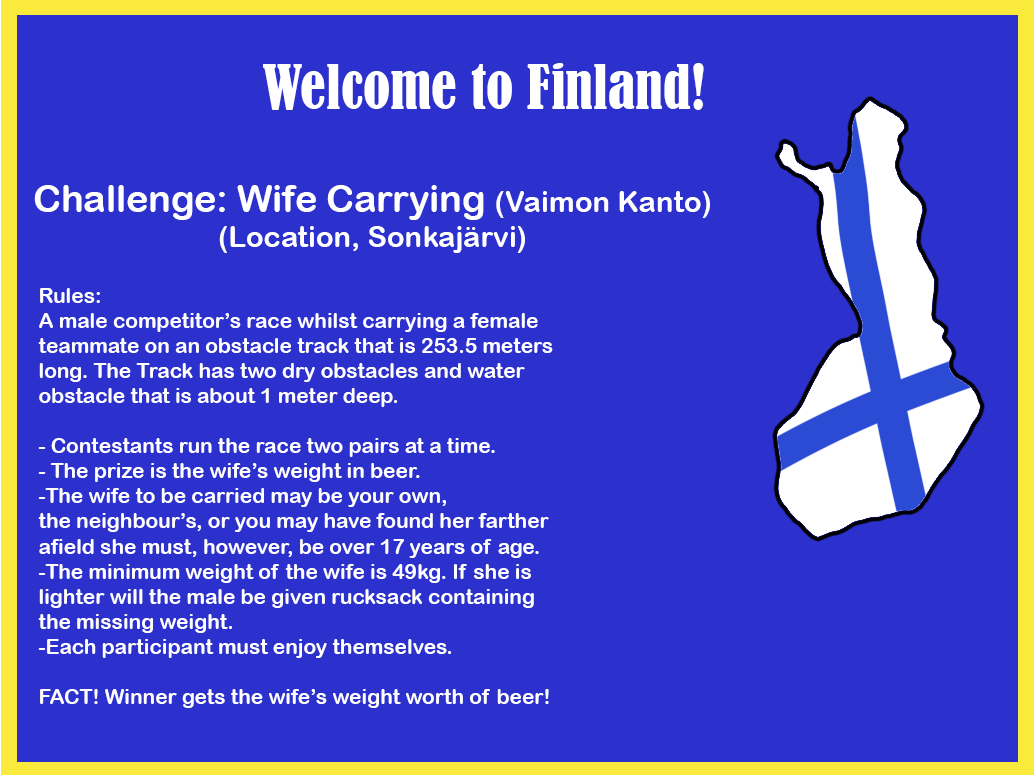
<style>
.page{position:relative;width:1035px;height:775px;background:#2c30cd}
.page>*{position:absolute;margin:0}
.t1{font:56.9px "BernardMT-Condensed";color:#ffffff}
.t2{font:29.2px "ArialRoundedMTBold";color:#ffffff}
.t3{font:37.5px "ArialRoundedMTBold";color:#ffffff}
.t4{font:20.9px "ArialRoundedMTBold";color:#ffffff}
</style>
<div class="page">
<p class="t1" style="left:263px;top:63px;width:441px;height:47px">Welcome to Finland!</p>
<p class="t2" style="left:34px;top:185px;width:676px;height:68px;text-align:center"><span class="t3">Challenge: Wife Carrying </span>(Vaimon Kanto)<br>(Location, Sonkajärvi)</p>
<p class="t4" style="left:38px;top:288px;width:515px;height:420px">Rules: <br>A male competitor’s race whilst carrying a female <br>teammate on an obstacle track that is 253.5 meters <br>long. The Track has two dry obstacles and water <br>obstacle that is about 1 meter deep.<br> <br>- Contestants run the race two pairs at a time. <br>- The prize is the wife’s weight in beer.<br>-The wife to be carried may be your own, <br>the neighbour’s, or you may have found her farther <br>afield she must, however, be over 17 years of age.<br>-The minimum weight of the wife is 49kg. If she is <br>lighter will the male be given rucksack containing <br>the missing weight.<br>-Each participant must enjoy themselves.<br><br>FACT! Winner gets the wife’s weight worth of beer!</p>
</div>
